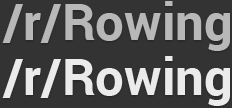
<style>
.page{position:relative;width:232px;height:108px;background:#333333}
.page>*{position:absolute;margin:0}
.t1{font:51px "Roboto-Bold";color:#b8b8b8}
.t2{font:51px "Roboto-Bold";color:#ffffff}
</style>
<div class="page">
<p class="t1" style="left:2px;top:1px;width:228px;height:50px">/r/Rowing</p>
<p class="t2" style="left:2px;top:56px;width:228px;height:50px">/r/Rowing</p>
</div>
